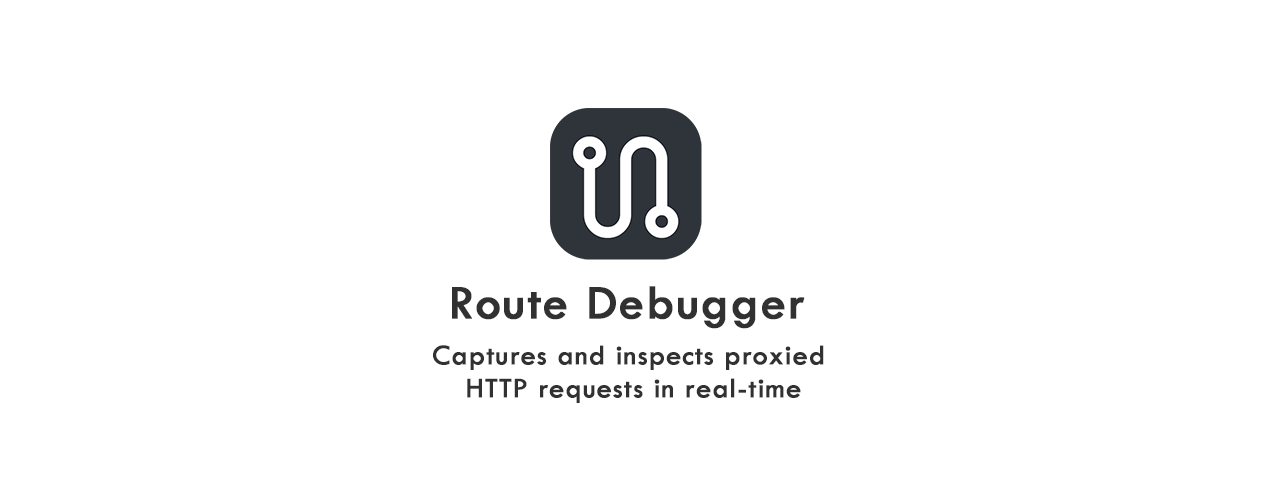
<style>
.page{position:relative;width:1280px;height:480px;background:#ffffff}
.page>*{position:absolute;margin:0}
.t1{font:50px "TwCenMT-Regular";letter-spacing:0.02em;color:#313131;font-weight:bold}
.t2{font:29.2px/33.3px "TwCenMT-Regular";letter-spacing:0.02em;color:#313131;font-weight:bold}
</style>
<div class="page">
<p class="t1" style="left:452px;top:286px;width:353px;height:43px">Route Debugger</p>
<p class="t2" style="left:433px;top:345px;width:391px;height:58px;text-align:center">Captures and inspects proxied <br>HTTP requests in real-time</p>
</div>
